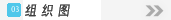
<style>
.page{position:relative;width:171px;height:20px;background:#ffffff}
.page>*{position:absolute;margin:0}
.t1{font:14px "New-Gulim";color:#3f3f3f;font-weight:bold;font-style:italic;scale:0.85 1}
</style>
<div class="page">
<p class="t1" style="left:25px;top:4px;width:45px;height:13px">组 织 图</p>
</div>
